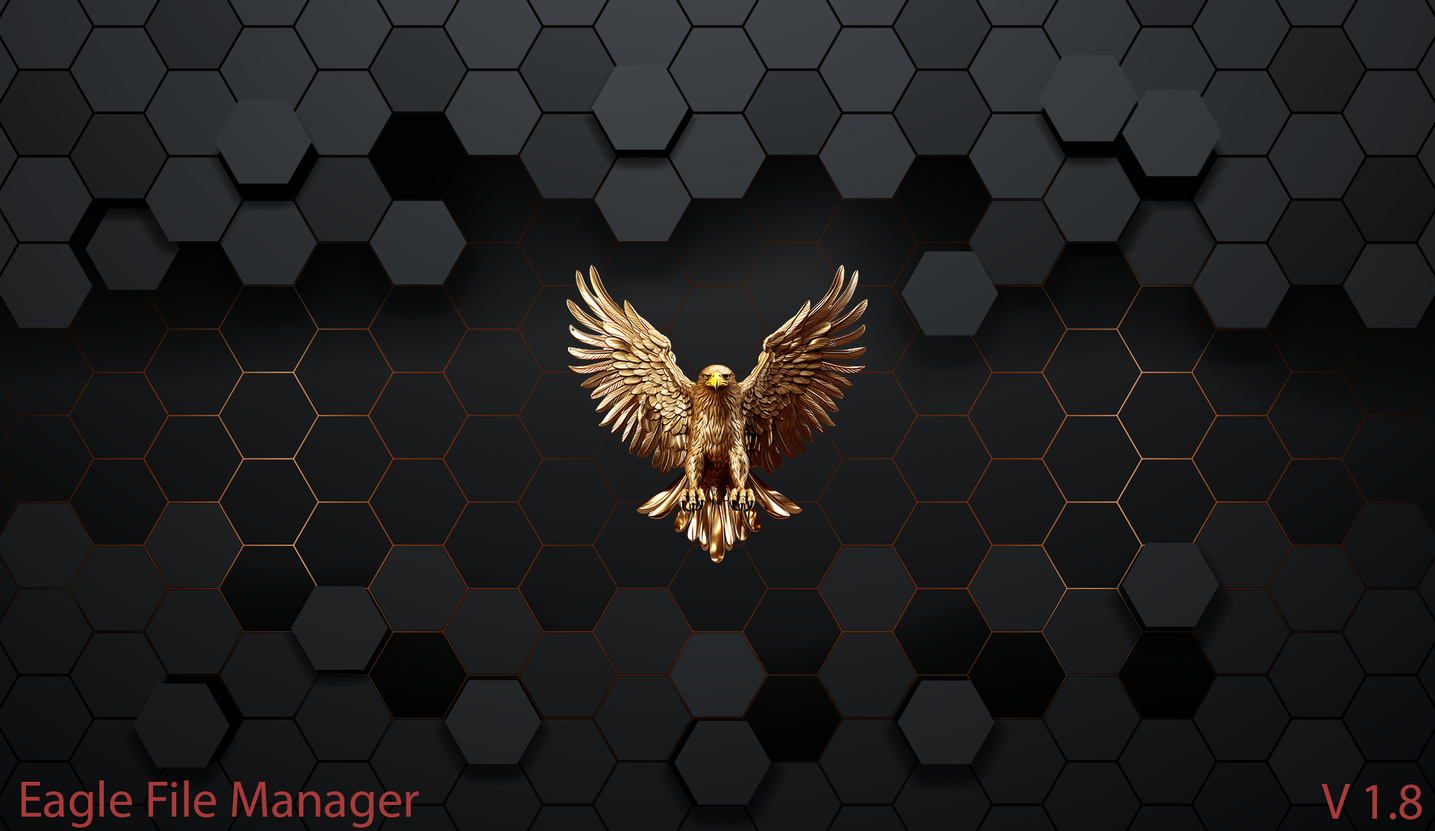
<style>
.page{position:relative;width:1435px;height:831px}
.page>*{position:absolute;margin:0}
.t1{font:51.3px "MyriadPro-Regular";color:#a73a3a}
</style>
<div class="page">
<p class="t1" style="left:21px;top:780px;width:398px;height:48px">Eagle File Manager</p>
<p class="t1" style="left:1322px;top:784px;width:100px;height:35px">V 1.8</p>
</div>
